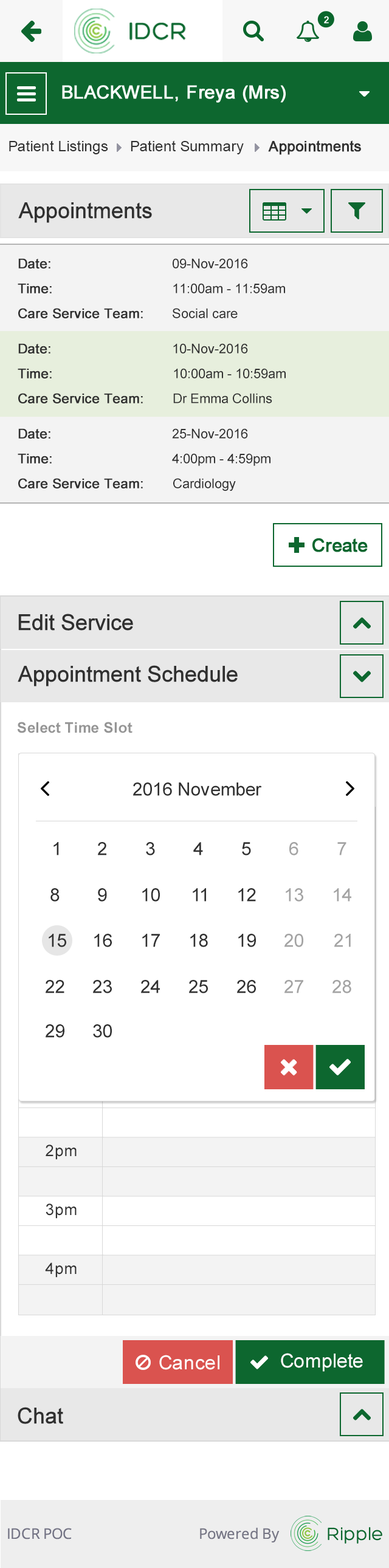
<style>
.page{position:relative;width:389px;height:1568px;background:#ffffff}
.page>*{position:absolute;margin:0}
.t1{font:14.6px "ArialMT";color:#313131}
.t2{font:14.6px "ArialMT";color:#313131;font-weight:bold}
.t3{font:21.9px "ArialMT";color:#303030;font-weight:bold}
.t4{font:13.4px "ArialMT";color:#303030;font-weight:bold}
.t5{font:13.4px "ArialMT";color:#303030}
.t6{font:14.6px "Arial-BoldMT";color:#959595}
.t7{font:18.2px "ArialMT";color:#303030}
.t8{font:18.2px "ArialMT";color:#a3a3a3}
.t9{font:15.8px "ArialMT";color:#303030}
.t10{font:19.4px "ArialMT";color:#ffffff}
</style>
<div class="page">
<p class="t1" style="left:9px;top:140px;width:99px;height:14px">Patient Listings</p>
<p class="t1" style="left:131px;top:140px;width:113px;height:14px">Patient Summary</p>
<p class="t2" style="left:268px;top:140px;width:93px;height:15px">Appointments</p>
<p class="t3" style="left:18px;top:202px;width:134px;height:21px">Appointments</p>
<p class="t4" style="left:18px;top:258px;width:32px;height:11px">Date:</p>
<p class="t5" style="left:173px;top:258px;width:75px;height:11px">09-Nov-2016</p>
<p class="t4" style="left:18px;top:283px;width:34px;height:10px">Time:</p>
<p class="t5" style="left:173px;top:283px;width:112px;height:10px">11:00am - 11:59am</p>
<p class="t4" style="left:18px;top:308px;width:125px;height:10px">Care Service Team:</p>
<p class="t5" style="left:173px;top:308px;width:65px;height:10px">Social care</p>
<p class="t4" style="left:18px;top:343px;width:32px;height:11px">Date:</p>
<p class="t5" style="left:173px;top:343px;width:75px;height:11px">10-Nov-2016</p>
<p class="t4" style="left:18px;top:368px;width:34px;height:10px">Time:</p>
<p class="t5" style="left:174px;top:368px;width:112px;height:10px">10:00am - 10:59am</p>
<p class="t4" style="left:18px;top:393px;width:125px;height:10px">Care Service Team:</p>
<p class="t5" style="left:173px;top:393px;width:99px;height:10px">Dr Emma Collins</p>
<p class="t4" style="left:18px;top:428px;width:32px;height:11px">Date:</p>
<p class="t5" style="left:172px;top:428px;width:76px;height:11px">25-Nov-2016</p>
<p class="t4" style="left:18px;top:453px;width:34px;height:11px">Time:</p>
<p class="t5" style="left:172px;top:453px;width:98px;height:13px">4:00pm - 4:59pm</p>
<p class="t4" style="left:18px;top:478px;width:125px;height:10px">Care Service Team:</p>
<p class="t5" style="left:173px;top:478px;width:63px;height:13px">Cardiology</p>
<p class="t3" style="left:18px;top:614px;width:115px;height:17px">Edit Service</p>
<p class="t3" style="left:18px;top:665px;width:220px;height:21px">Appointment Schedule</p>
<p class="t6" style="left:17px;top:722px;width:115px;height:11px">Select Time Slot</p>
<p class="t7" style="left:133px;top:782px;width:129px;height:14px">2016 November</p>
<p class="t7" style="left:53px;top:842px;width:6px;height:13px">1</p>
<p class="t7" style="left:98px;top:842px;width:8px;height:13px">2</p>
<p class="t7" style="left:146px;top:842px;width:9px;height:13px">3</p>
<p class="t7" style="left:193px;top:842px;width:10px;height:13px">4</p>
<p class="t7" style="left:242px;top:842px;width:9px;height:13px">5</p>
<p class="t8" style="left:289px;top:842px;width:9px;height:13px">6</p>
<p class="t8" style="left:337px;top:842px;width:9px;height:13px">7</p>
<p class="t7" style="left:50px;top:888px;width:10px;height:14px">8</p>
<p class="t7" style="left:98px;top:888px;width:9px;height:14px">9</p>
<p class="t7" style="left:142px;top:888px;width:18px;height:14px">10</p>
<p class="t7" style="left:193px;top:888px;width:13px;height:14px">11</p>
<p class="t7" style="left:238px;top:888px;width:18px;height:14px">12</p>
<p class="t8" style="left:286px;top:888px;width:17px;height:14px">13</p>
<p class="t8" style="left:334px;top:888px;width:17px;height:14px">14</p>
<p class="t7" style="left:49px;top:934px;width:17px;height:13px">15</p>
<p class="t7" style="left:94px;top:934px;width:18px;height:13px">16</p>
<p class="t7" style="left:142px;top:934px;width:18px;height:13px">17</p>
<p class="t7" style="left:190px;top:934px;width:18px;height:13px">18</p>
<p class="t7" style="left:238px;top:934px;width:18px;height:13px">19</p>
<p class="t8" style="left:284px;top:934px;width:19px;height:13px">20</p>
<p class="t8" style="left:334px;top:934px;width:17px;height:13px">21</p>
<p class="t7" style="left:46px;top:980px;width:18px;height:13px">22</p>
<p class="t7" style="left:93px;top:980px;width:19px;height:13px">23</p>
<p class="t7" style="left:141px;top:980px;width:19px;height:13px">24</p>
<p class="t7" style="left:189px;top:980px;width:19px;height:13px">25</p>
<p class="t7" style="left:237px;top:980px;width:19px;height:13px">26</p>
<p class="t8" style="left:284px;top:980px;width:19px;height:13px">27</p>
<p class="t8" style="left:332px;top:980px;width:19px;height:13px">28</p>
<p class="t7" style="left:46px;top:1024px;width:18px;height:14px">29</p>
<p class="t7" style="left:93px;top:1024px;width:19px;height:14px">30</p>
<p class="t9" style="left:46px;top:1145px;width:31px;height:15px">2pm</p>
<p class="t9" style="left:46px;top:1203px;width:31px;height:16px">3pm</p>
<p class="t9" style="left:45px;top:1262px;width:32px;height:16px">4pm</p>
<p class="t10" style="left:159px;top:1355px;width:60px;height:15px">Cancel</p>
<p class="t10" style="left:281px;top:1353px;width:82px;height:19px">Complete</p>
<p class="t3" style="left:18px;top:1407px;width:45px;height:17px">Chat</p>
</div>
